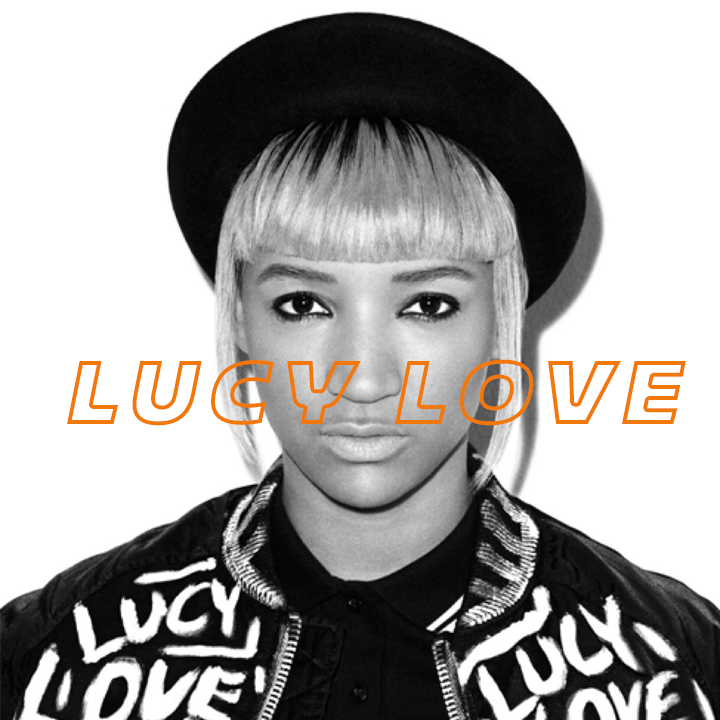
<style>
.page{position:relative;width:720px;height:720px;background:#ffffff}
.page>*{position:absolute;margin:0}
.t1{font:90px "Majoris-Italic";letter-spacing:0.1em;text-transform:uppercase}
</style>
<div class="page">
<p class="t1" style="left:67px;top:359px;width:619px;height:67px">lucy love</p>
</div>
